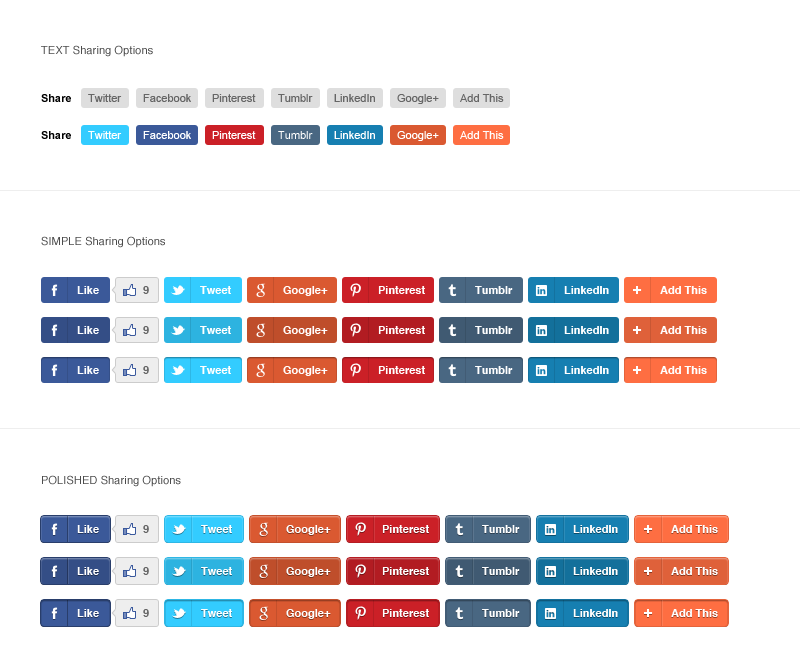
<style>
.page{position:relative;width:800px;height:670px;background:#ffffff}
.page>*{position:absolute;margin:0}
.t1{font:11px "Helvetica";letter-spacing:0.01em;color:#4c4c4c}
.t2{font:11px "Arial-BoldMT";color:#000000}
.t3{font:11px "ArialMT";color:#666666}
.t4{font:11px "ArialMT";color:#ffffff}
.t5{font:11px "Helvetica-Bold";color:#ffffff}
.t6{font:11px "Helvetica-Bold";color:#666666}
</style>
<div class="page">
<p class="t1" style="left:41px;top:45px;width:112px;height:12px">TEXT Sharing Options</p>
<p class="t2" style="left:41px;top:94px;width:30px;height:8px">Share</p>
<p class="t3" style="left:88px;top:94px;width:34px;height:8px">Twitter</p>
<p class="t3" style="left:143px;top:94px;width:48px;height:8px">Facebook</p>
<p class="t3" style="left:212px;top:94px;width:44px;height:8px">Pinterest</p>
<p class="t3" style="left:278px;top:94px;width:35px;height:8px">Tumblr</p>
<p class="t3" style="left:334px;top:94px;width:41px;height:8px">LinkedIn</p>
<p class="t3" style="left:397px;top:94px;width:42px;height:10px">Google+</p>
<p class="t3" style="left:460px;top:94px;width:44px;height:8px">Add This</p>
<p class="t2" style="left:41px;top:131px;width:30px;height:8px">Share</p>
<p class="t4" style="left:88px;top:131px;width:34px;height:8px">Twitter</p>
<p class="t4" style="left:143px;top:131px;width:48px;height:8px">Facebook</p>
<p class="t4" style="left:212px;top:131px;width:44px;height:8px">Pinterest</p>
<p class="t4" style="left:278px;top:131px;width:35px;height:8px">Tumblr</p>
<p class="t4" style="left:334px;top:131px;width:41px;height:8px">LinkedIn</p>
<p class="t4" style="left:397px;top:131px;width:42px;height:10px">Google+</p>
<p class="t4" style="left:460px;top:131px;width:44px;height:8px">Add This</p>
<p class="t1" style="left:41px;top:236px;width:124px;height:12px">SIMPLE Sharing Options</p>
<p class="t5" style="left:77px;top:286px;width:22px;height:8px">Like</p>
<p class="t6" style="left:143px;top:286px;width:6px;height:8px">9</p>
<p class="t5" style="left:200px;top:286px;width:31px;height:8px">Tweet</p>
<p class="t5" style="left:283px;top:286px;width:45px;height:10px">Google+</p>
<p class="t5" style="left:378px;top:286px;width:47px;height:8px">Pinterest</p>
<p class="t5" style="left:475px;top:286px;width:38px;height:8px">Tumblr</p>
<p class="t5" style="left:564px;top:286px;width:45px;height:8px">LinkedIn</p>
<p class="t5" style="left:660px;top:286px;width:47px;height:8px">Add This</p>
<p class="t5" style="left:77px;top:326px;width:22px;height:8px">Like</p>
<p class="t6" style="left:143px;top:326px;width:6px;height:8px">9</p>
<p class="t5" style="left:200px;top:326px;width:31px;height:8px">Tweet</p>
<p class="t5" style="left:283px;top:326px;width:45px;height:10px">Google+</p>
<p class="t5" style="left:378px;top:326px;width:47px;height:8px">Pinterest</p>
<p class="t5" style="left:475px;top:326px;width:38px;height:8px">Tumblr</p>
<p class="t5" style="left:564px;top:326px;width:45px;height:8px">LinkedIn</p>
<p class="t5" style="left:660px;top:326px;width:47px;height:8px">Add This</p>
<p class="t5" style="left:77px;top:366px;width:22px;height:8px">Like</p>
<p class="t6" style="left:143px;top:366px;width:6px;height:8px">9</p>
<p class="t5" style="left:200px;top:366px;width:31px;height:8px">Tweet</p>
<p class="t5" style="left:283px;top:366px;width:45px;height:10px">Google+</p>
<p class="t5" style="left:378px;top:366px;width:47px;height:8px">Pinterest</p>
<p class="t5" style="left:475px;top:366px;width:38px;height:8px">Tumblr</p>
<p class="t5" style="left:564px;top:366px;width:45px;height:8px">LinkedIn</p>
<p class="t5" style="left:660px;top:366px;width:47px;height:8px">Add This</p>
<p class="t1" style="left:42px;top:475px;width:139px;height:12px">POLISHED Sharing Options</p>
<p class="t5" style="left:77px;top:525px;width:22px;height:8px">Like</p>
<p class="t6" style="left:143px;top:525px;width:6px;height:8px">9</p>
<p class="t5" style="left:201px;top:525px;width:31px;height:8px">Tweet</p>
<p class="t5" style="left:286px;top:525px;width:45px;height:10px">Google+</p>
<p class="t5" style="left:382px;top:525px;width:47px;height:8px">Pinterest</p>
<p class="t5" style="left:482px;top:525px;width:38px;height:8px">Tumblr</p>
<p class="t5" style="left:573px;top:525px;width:45px;height:8px">LinkedIn</p>
<p class="t5" style="left:671px;top:525px;width:47px;height:8px">Add This</p>
<p class="t5" style="left:77px;top:567px;width:22px;height:8px">Like</p>
<p class="t6" style="left:143px;top:567px;width:6px;height:8px">9</p>
<p class="t5" style="left:201px;top:567px;width:31px;height:8px">Tweet</p>
<p class="t5" style="left:286px;top:567px;width:45px;height:10px">Google+</p>
<p class="t5" style="left:382px;top:567px;width:47px;height:8px">Pinterest</p>
<p class="t5" style="left:482px;top:567px;width:38px;height:8px">Tumblr</p>
<p class="t5" style="left:573px;top:567px;width:45px;height:8px">LinkedIn</p>
<p class="t5" style="left:671px;top:567px;width:47px;height:8px">Add This</p>
<p class="t5" style="left:77px;top:609px;width:22px;height:8px">Like</p>
<p class="t6" style="left:143px;top:609px;width:6px;height:8px">9</p>
<p class="t5" style="left:201px;top:609px;width:31px;height:8px">Tweet</p>
<p class="t5" style="left:286px;top:609px;width:45px;height:10px">Google+</p>
<p class="t5" style="left:382px;top:609px;width:47px;height:8px">Pinterest</p>
<p class="t5" style="left:482px;top:609px;width:38px;height:8px">Tumblr</p>
<p class="t5" style="left:573px;top:609px;width:45px;height:8px">LinkedIn</p>
<p class="t5" style="left:671px;top:609px;width:47px;height:8px">Add This</p>
</div>
